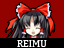
<style>
.page{position:relative;width:64px;height:48px;background:#920300}
.page>*{position:absolute;margin:0}
.t1{font:10px "Cambria";color:#ffffff}
</style>
<div class="page">
<p class="t1" style="left:17px;top:40px;width:30px;height:7px">REIMU</p>
</div>
